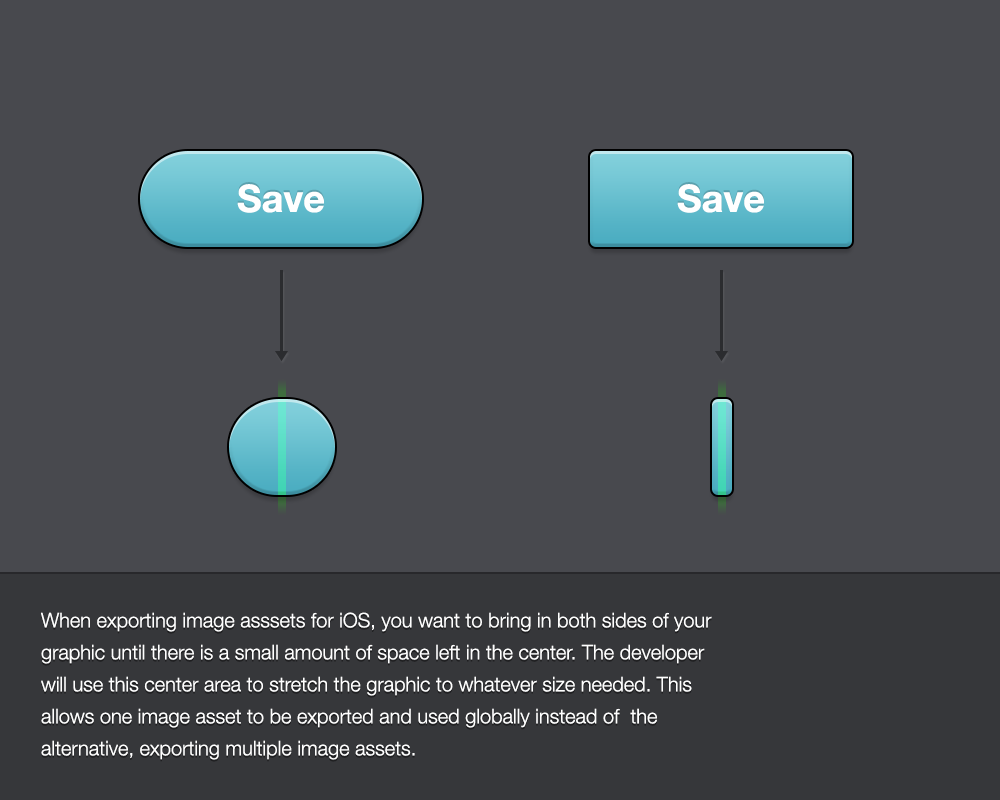
<style>
.page{position:relative;width:1000px;height:800px;background:#48494e}
.page>*{position:absolute;margin:0}
.t1{font:38px "HelveticaNeue-Bold";color:#ffffff}
.t2{font:20px/32px "HelveticaNeue-Light";color:#ffffff}
</style>
<div class="page">
<p class="t1" style="left:237px;top:184px;width:87px;height:29px">Save</p>
<p class="t1" style="left:677px;top:184px;width:87px;height:29px">Save</p>
<p class="t2" style="left:41px;top:612px;width:671px;height:148px">When exporting image asssets for iOS, you want to bring in both sides of your graphic until there is a small amount of space left in the center. The developer will use this center area to stretch the graphic to whatever size needed. This allows one image asset to be exported and used globally instead of  the alternative, exporting multiple image assets.</p>
</div>
